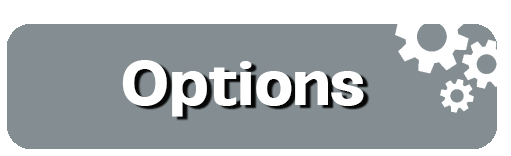
<style>
.page{position:relative;width:511px;height:156px;background:#848e92}
.page>*{position:absolute;margin:0}
.t1{font:59px "Oddlini-ExtraBold";color:#ffffff}
</style>
<div class="page">
<p class="t1" style="left:122px;top:60px;width:242px;height:57px">Options</p>
</div>
